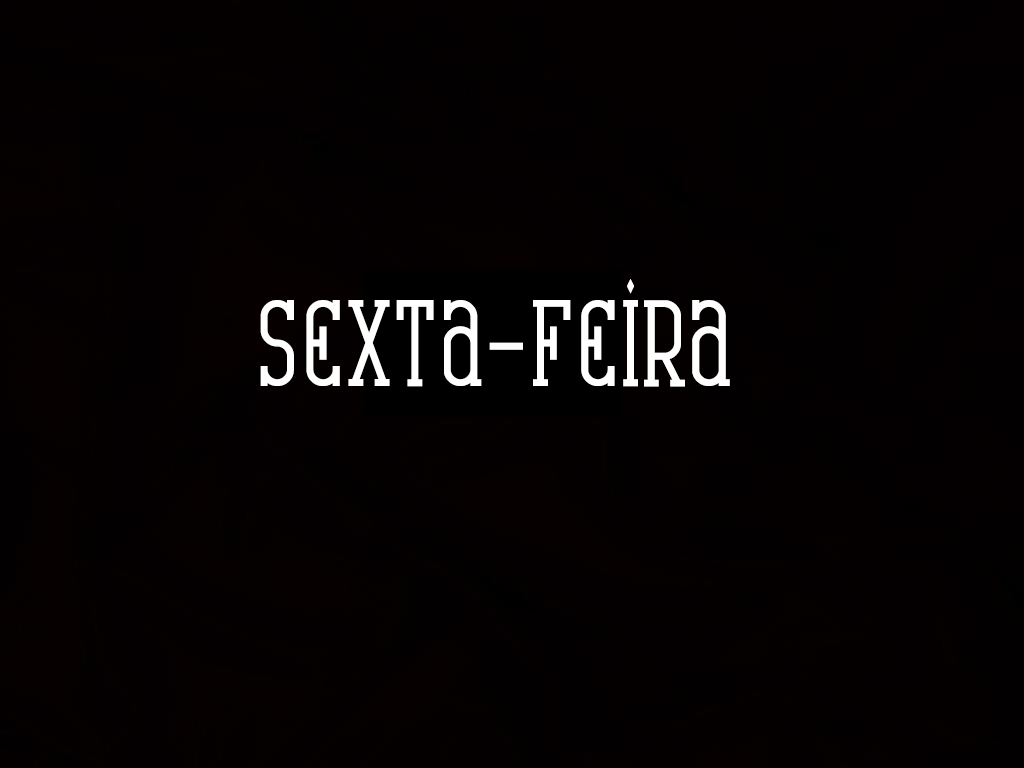
<style>
.page{position:relative;width:1024px;height:768px;background:#040000}
.page>*{position:absolute;margin:0}
.t1{font:132px "CatharsisRequiemBold";letter-spacing:-0.003em;color:#ffffff}
</style>
<div class="page">
<p class="t1" style="left:260px;top:279px;width:470px;height:108px">sexta-feira</p>
</div>
